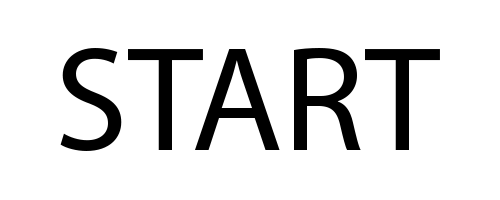
<style>
.page{position:relative;width:500px;height:200px;background:#ffffff}
.page>*{position:absolute;margin:0}
.t1{font:150px "MyriadPro-Regular";color:#000000}
</style>
<div class="page">
<p class="t1" style="left:60px;top:48px;width:380px;height:103px">START</p>
</div>
